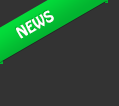
<style>
.page{position:relative;width:119px;height:106px;background:#333333}
.page>*{position:absolute;margin:0}
.t1{font:14px "HoboStd";letter-spacing:0.02em;color:#ffffff}
</style>
<div class="page">
<p class="t1" style="left:16px;top:10px;width:38px;height:29px;rotate:-30deg">NEWS</p>
</div>
